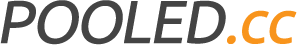
<style>
.page{position:relative;width:297px;height:45px;background:#ffffff}
.page>*{position:absolute;margin:0}
.t1{font:60px "Ubuntu";color:#444444;font-weight:bold;font-style:italic}
.t2{font:60px "Ubuntu";color:#f8941c;font-weight:bold;font-style:italic}
</style>
<div class="page">
<p class="t1" style="left:0px;top:0px;width:297px;height:45px">POOLED<span class="t2">.cc</span></p>
</div>
